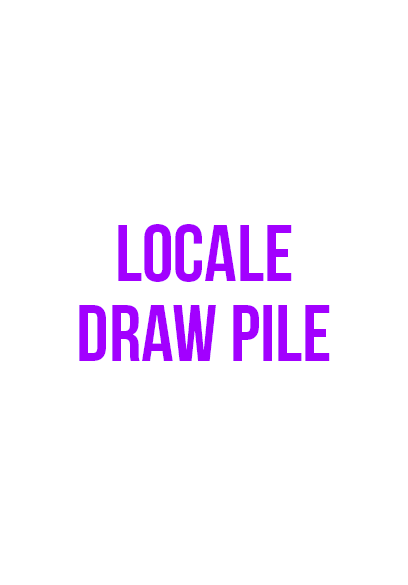
<style>
.page{position:relative;width:408px;height:585px;background:#ffffff}
.page>*{position:absolute;margin:0}
.t1{font:80px/80px "BebasNeue";color:#a200ff}
</style>
<div class="page">
<p class="t1" style="left:79px;top:224px;width:251px;height:137px;text-align:center">locale<br>draw pile</p>
</div>
